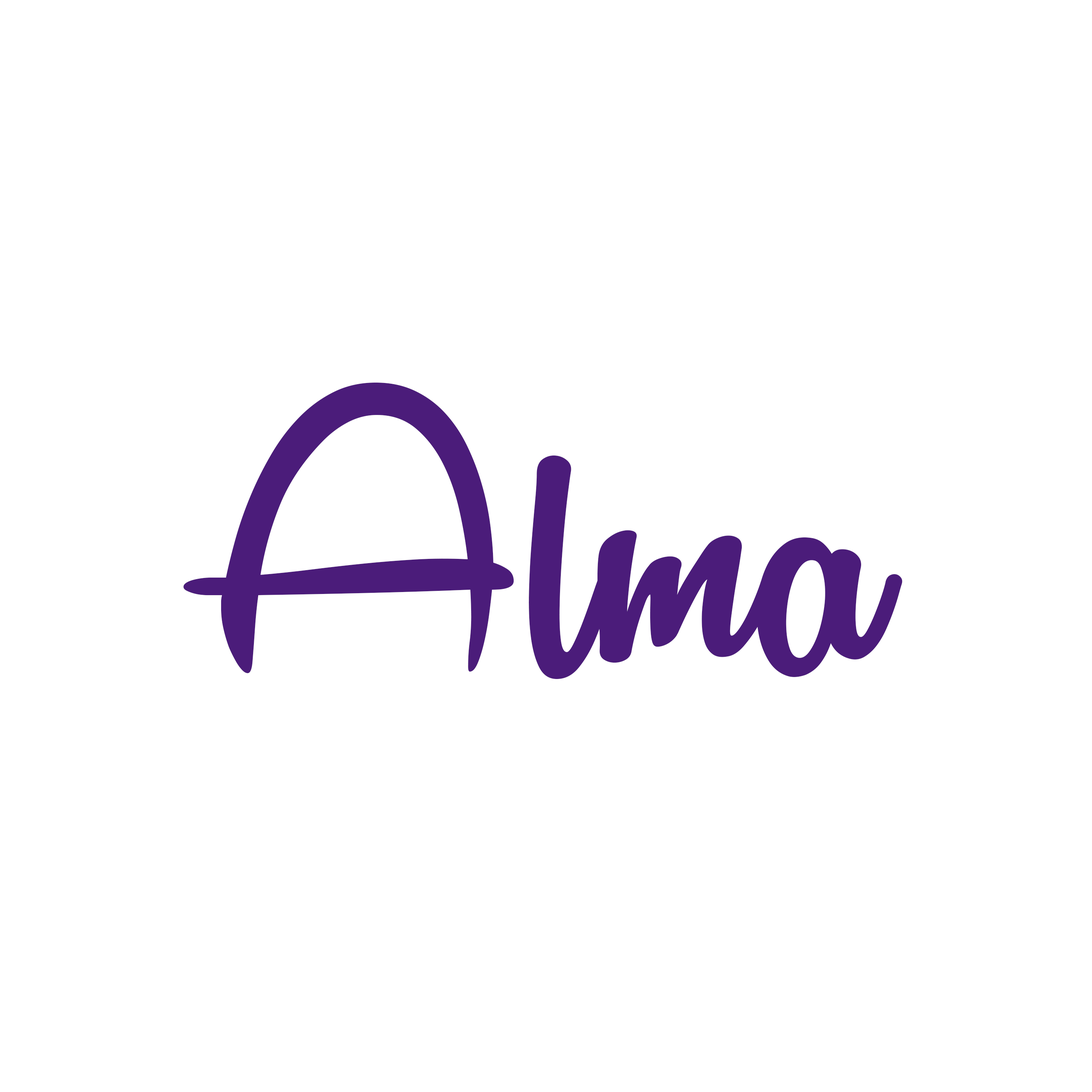
<style>
.page{position:relative;width:1092px;height:1092px;background:#ffffff}
.page>*{position:absolute;margin:0}
.t1{font:442.6px "RemachineScriptPersonalUse";color:#4b1c7a}
</style>
<div class="page">
<p class="t1" style="left:183px;top:383px;width:719px;height:296px">Alma</p>
</div>
